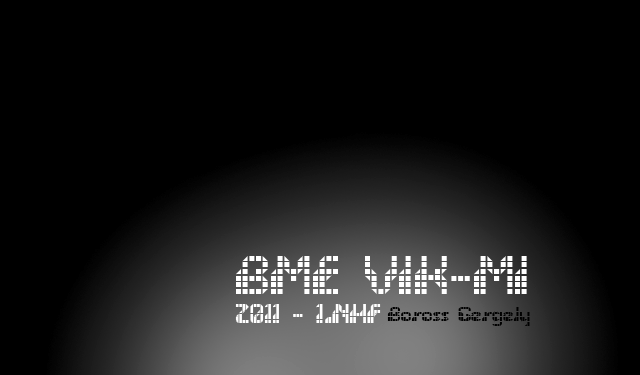
<style>
.page{position:relative;width:640px;height:375px;background:#000000}
.page>*{position:absolute;margin:0}
.t1{font:48px "Wargames";color:#ffffff}
.t2{font:24px "Wargames";color:#ffffff}
.t3{font:18px "Wargames";color:#000000}
</style>
<div class="page">
<p class="t1" style="left:236px;top:256px;width:291px;height:38px">BME VIK-MI</p>
<p class="t2" style="left:235px;top:304px;width:146px;height:19px">2011 - 1.NHF</p>
<p class="t3" style="left:387px;top:307px;width:143px;height:19px">Boross Gergely</p>
</div>
